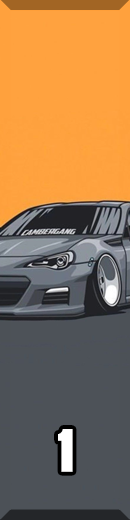
<style>
.page{position:relative;width:130px;height:520px;background:#4d5258}
.page>*{position:absolute;margin:0}
.t1{font:60px "Haettenschweiler";color:#ffffff;font-weight:bold}
</style>
<div class="page">
<p class="t1" style="left:58px;top:429px;width:15px;height:43px">1</p>
</div>
